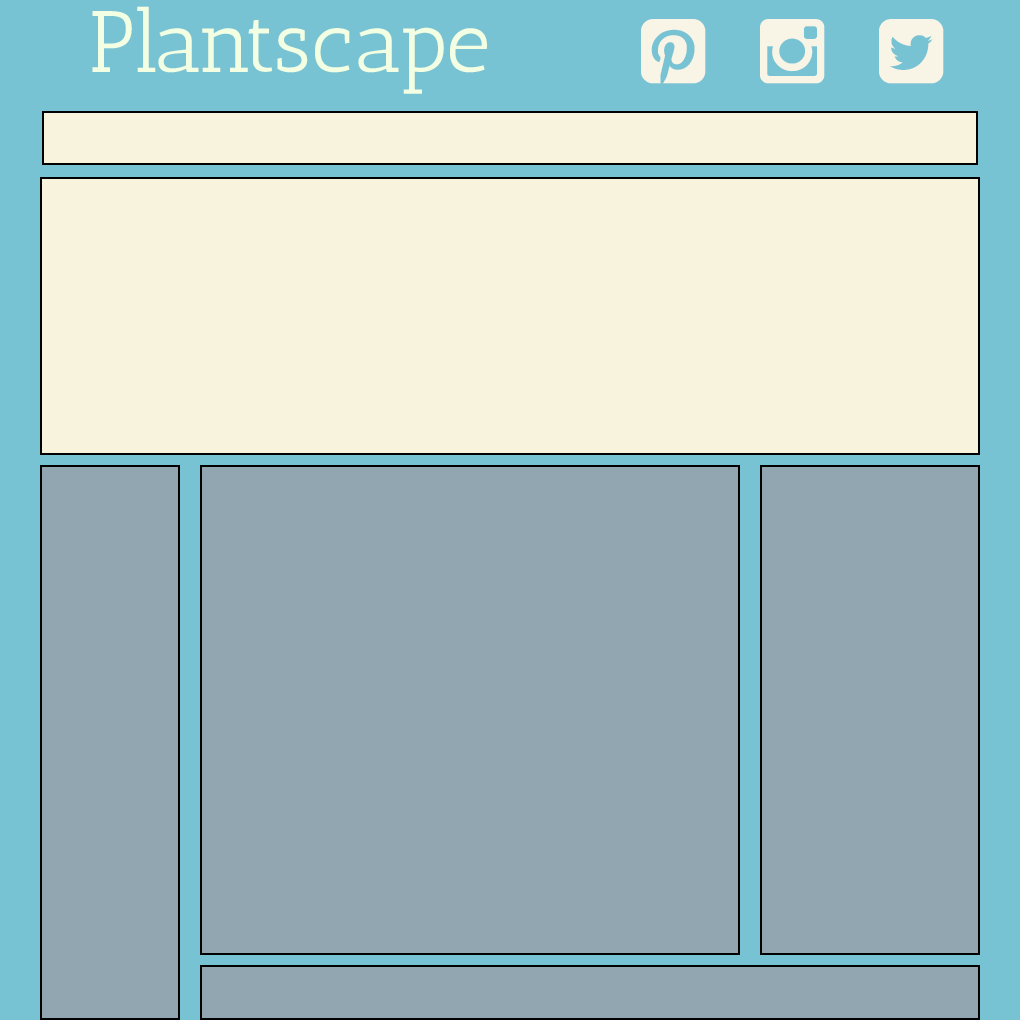
<style>
.page{position:relative;width:1020px;height:1020px;background:#92a6b2}
.page>*{position:absolute;margin:0}
.t1{font:87px "AnticSlab-Regular";color:#f3ffe2}
</style>
<div class="page">
<p class="t1" style="left:92px;top:6px;width:395px;height:88px">Plantscape</p>
</div>
